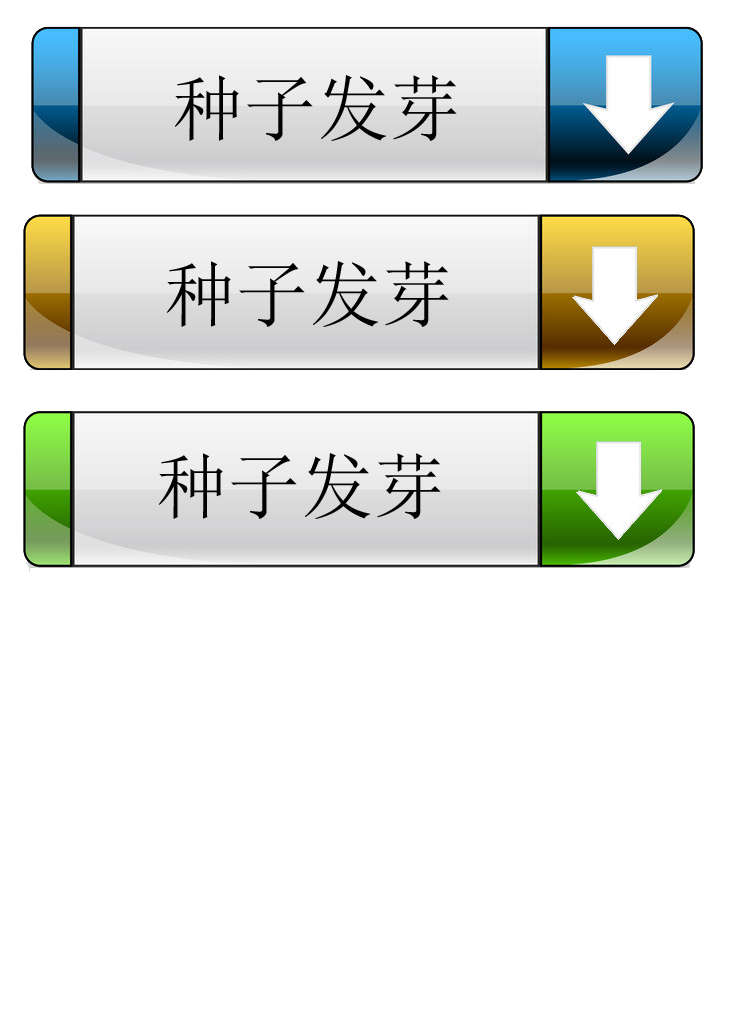
<style>
.page{position:relative;width:734px;height:1024px;background:#ffffff}
.page>*{position:absolute;margin:0}
.t1{font:72px "SimSun";letter-spacing:0.005em;color:#020202}
</style>
<div class="page">
<p class="t1" style="left:174px;top:75px;width:283px;height:66px">种子发芽</p>
<p class="t1" style="left:166px;top:261px;width:283px;height:66px">种子发芽</p>
<p class="t1" style="left:158px;top:453px;width:283px;height:66px">种子发芽</p>
</div>
